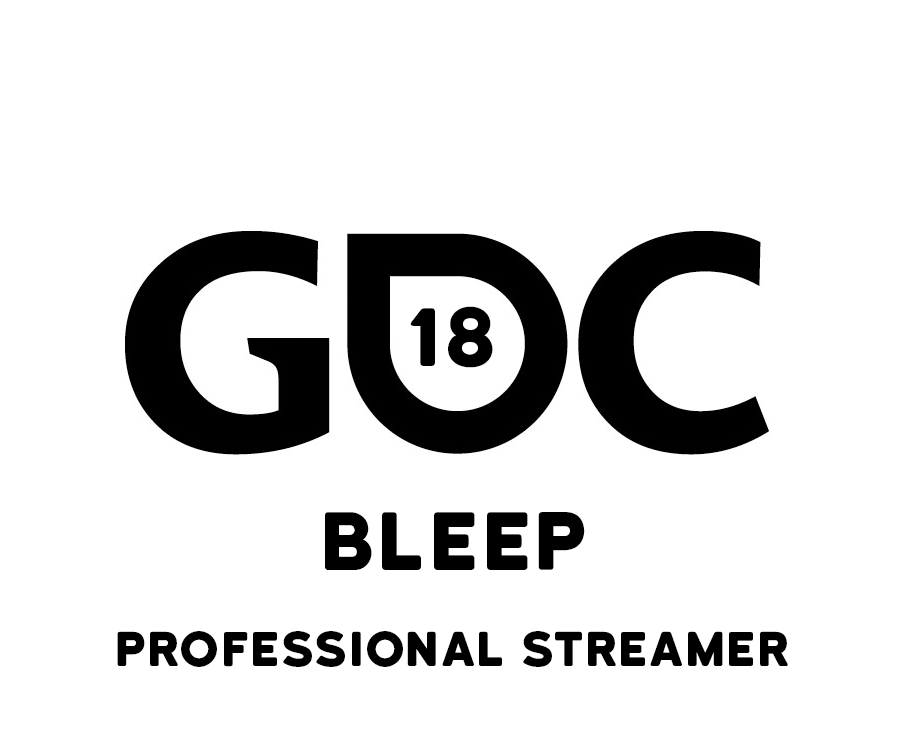
<style>
.page{position:relative;width:900px;height:750px;background:#ffffff}
.page>*{position:absolute;margin:0}
.t1{font:78.1px "KatahdinRound-Regular";color:#000000}
.t2{font:46.2px "KatahdinRound-Regular";color:#000000}
</style>
<div class="page">
<p class="t1" style="left:410px;top:306px;width:83px;height:62px">18</p>
<p class="t1" style="left:325px;top:512px;width:260px;height:58px">BLEEP</p>
<p class="t2" style="left:117px;top:631px;width:671px;height:36px">PROFESSIONAL STREAMER</p>
</div>
